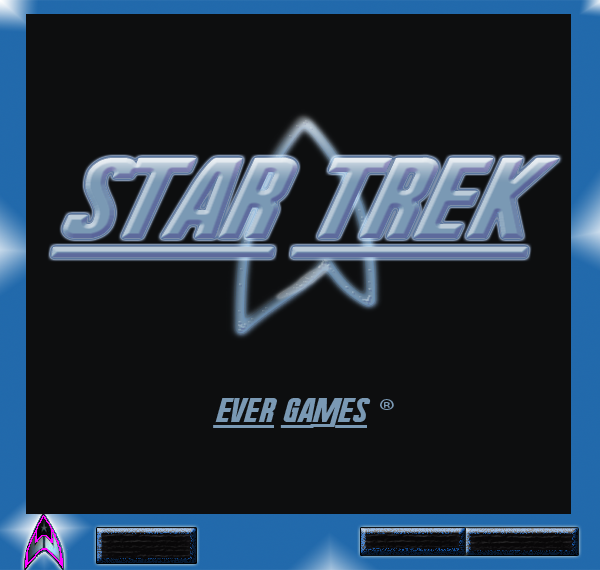
<style>
.page{position:relative;width:600px;height:570px;background:#0d0e0f}
.page>*{position:absolute;margin:0}
.t1{font:113.5px "RadiumCorp";scale:1.34 1}
.t2{font:33.1px "RadiumCorp";color:#7a99b4;scale:1.25 1}
.t3{font:33.1px "MyriadPro-Regular";color:#7a99b4;scale:1.25 1}
</style>
<div class="page">
<p class="t1" style="left:51px;top:157px;width:509px;height:101px">star trek</p>
<p class="t2" style="left:213px;top:398px;width:181px;height:30px">ever games <span class="t3">®</span></p>
</div>
